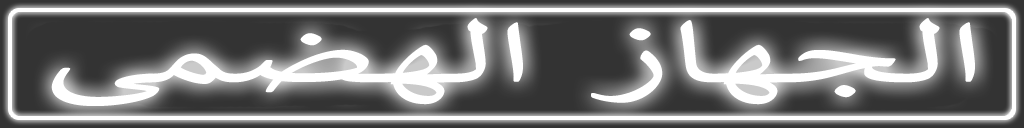
<style>
.page{position:relative;width:1024px;height:128px;background:#333333}
.page>*{position:absolute;margin:0}
.t1{font:99.8px "Calibri";color:#ffffff;scale:1.86 1}
</style>
<div class="page">
<p class="t1" style="left:51px;top:18px;width:924px;height:88px">ﻰﻤﻀﻬﻟﺍ ﺯﺎﻬﺠﻟﺍ</p>
</div>
